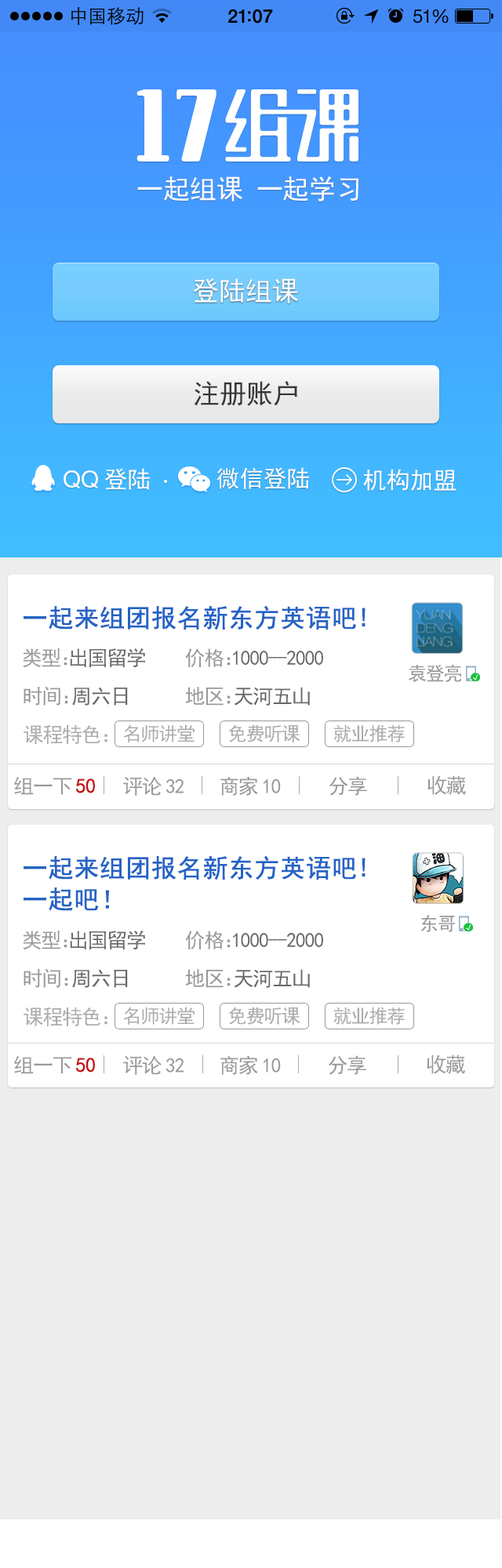
<style>
.page{position:relative;width:502px;height:1568px;background:#ededed}
.page>*{position:absolute;margin:0}
.t1{font:26.7px "SimHei";letter-spacing:-0.005em;color:#fbfbfb}
.t2{font:26.7px "SimHei";color:#fefefe}
.t3{font:26.7px "SimHei";color:#373737}
.t4{font:23.5px "SimHei";color:#fefefe}
.t5{font:25.1px "SimHei";color:#2463c5;font-weight:bold}
.t6{font:20.4px "SimHei";letter-spacing:-0.05em;color:#696969}
.t7{font:20.4px "SimHei";letter-spacing:-0.05em;color:#999999}
.t8{font:20.4px "SimHei";letter-spacing:-0.62em;color:#999999}
.t9{font:18.8px "SimHei";letter-spacing:-0.05em;color:#999999}
.t10{font:20.4px "SimHei";letter-spacing:-0.5em;color:#999999}
.t11{font:20.4px "SimHei";letter-spacing:-0.52em;color:#999999}
.t12{font:20.4px "SimHei";letter-spacing:-0.05em;color:#acacac}
.t13{font:20.4px "SimHei";color:#acacac}
.t14{font:18.8px "SimHei";letter-spacing:-0.05em;color:#acacac}
.t15{font:20.4px "SimHei";letter-spacing:0.15em;color:#999999}
.t16{font:20.4px "SimHei";letter-spacing:-0.05em;color:#c61414;font-weight:bold}
.t17{font:25.1px/31.4px "SimHei";color:#2463c5;font-weight:bold}
</style>
<div class="page">
<p class="t1" style="left:137px;top:176px;width:222px;height:25px">一起组课 一起学习</p>
<p class="t2" style="left:193px;top:278px;width:105px;height:25px">登陆组课</p>
<p class="t3" style="left:194px;top:381px;width:103px;height:25px">注册账户</p>
<p class="t4" style="left:104px;top:468px;width:46px;height:22px">登陆</p>
<p class="t4" style="left:216px;top:467px;width:93px;height:22px">微信登陆</p>
<p class="t4" style="left:363px;top:469px;width:93px;height:22px">机构加盟</p>
<p class="t5" style="left:24px;top:605px;width:341px;height:25px">一起来组团报名新东方英语吧!</p>
<p class="t6" style="left:23px;top:648px;width:122px;height:19px"><span class="t7">类型</span><span class="t8">：</span>出国留学</p>
<p class="t6" style="left:185px;top:648px;width:138px;height:19px"><span class="t7">价格</span><span class="t8">：</span>1000--2000</p>
<p class="t9" style="left:408px;top:664px;width:54px;height:18px">袁登亮</p>
<p class="t6" style="left:24px;top:686px;width:104px;height:20px"><span class="t7">时间</span><span class="t10">：</span>周六日</p>
<p class="t6" style="left:185px;top:687px;width:125px;height:19px"><span class="t7">地区</span><span class="t11">：</span>天河五山</p>
<p class="t12" style="left:24px;top:724px;width:83px;height:20px">课程特色<span class="t13">：</span></p>
<p class="t14" style="left:123px;top:724px;width:71px;height:18px">名师讲堂</p>
<p class="t14" style="left:229px;top:724px;width:71px;height:18px">免费听课</p>
<p class="t14" style="left:333px;top:724px;width:72px;height:18px">就业推荐</p>
<p class="t7" style="left:14px;top:777px;width:81px;height:18px">组一<span class="t15">下</span><span class="t16">50</span></p>
<p class="t7" style="left:123px;top:776px;width:60px;height:20px">评<span class="t15">论</span>32</p>
<p class="t7" style="left:220px;top:776px;width:61px;height:20px">商<span class="t15">家</span>10</p>
<p class="t7" style="left:329px;top:776px;width:38px;height:20px">分享</p>
<p class="t7" style="left:427px;top:775px;width:39px;height:20px">收藏</p>
<p class="t17" style="left:24px;top:855px;width:341px;height:56px">一起来组团报名新东方英语吧!<br>一起吧！</p>
<p class="t9" style="left:421px;top:915px;width:35px;height:17px">东哥</p>
<p class="t6" style="left:23px;top:930px;width:122px;height:19px"><span class="t7">类型</span><span class="t8">：</span>出国留学</p>
<p class="t6" style="left:185px;top:931px;width:138px;height:18px"><span class="t7">价格</span><span class="t8">：</span>1000--2000</p>
<p class="t6" style="left:24px;top:968px;width:104px;height:20px"><span class="t7">时间</span><span class="t10">：</span>周六日</p>
<p class="t6" style="left:185px;top:969px;width:125px;height:19px"><span class="t7">地区</span><span class="t11">：</span>天河五山</p>
<p class="t12" style="left:24px;top:1007px;width:83px;height:19px">课程特色<span class="t13">：</span></p>
<p class="t14" style="left:123px;top:1007px;width:71px;height:18px">名师讲堂</p>
<p class="t14" style="left:229px;top:1007px;width:71px;height:18px">免费听课</p>
<p class="t14" style="left:333px;top:1007px;width:72px;height:18px">就业推荐</p>
<p class="t7" style="left:14px;top:1056px;width:81px;height:18px">组一<span class="t15">下</span><span class="t16">50</span></p>
<p class="t7" style="left:123px;top:1055px;width:60px;height:20px">评<span class="t15">论</span>32</p>
<p class="t7" style="left:220px;top:1055px;width:61px;height:20px">商<span class="t15">家</span>10</p>
<p class="t7" style="left:328px;top:1055px;width:38px;height:20px">分享</p>
<p class="t7" style="left:426px;top:1054px;width:39px;height:20px">收藏</p>
</div>
